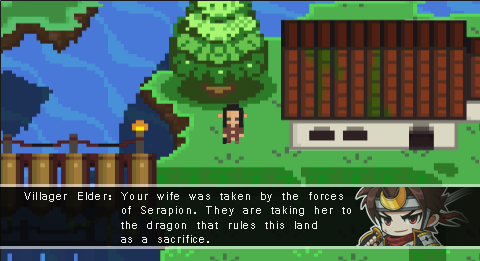
<style>
.page{position:relative;width:480px;height:261px}
.page>*{position:absolute;margin:0}
.t1{font:12px "Vrinda";letter-spacing:0.1em;color:#fefefe}
</style>
<div class="page">
<p class="t1" style="left:24px;top:192px;width:327px;height:51px;opacity:0.9">Villager Elder: Your wife was taken by the forces<br>     of Serapion. They are taking her to<br>     the dragon that rules this land <br>     as a sacrifice.</p>
</div>
